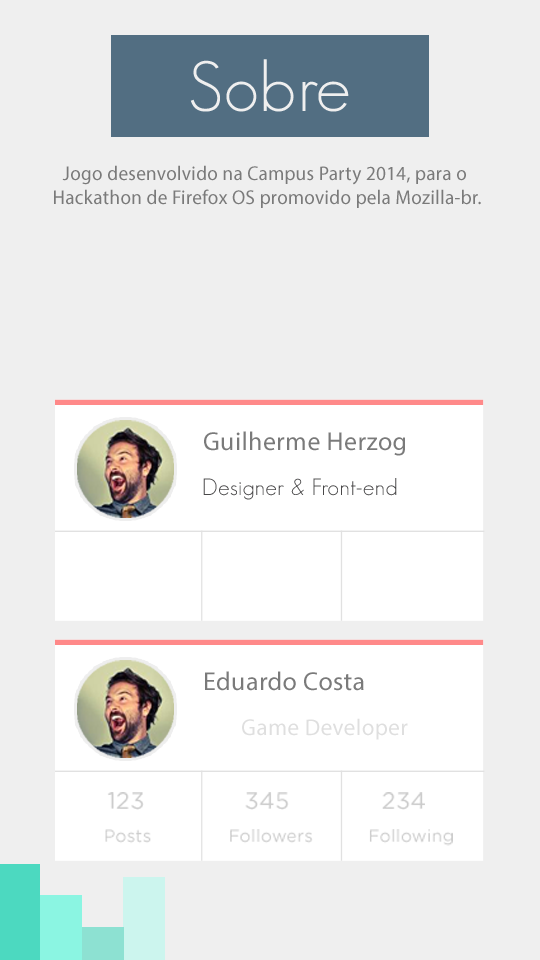
<style>
.page{position:relative;width:540px;height:960px;background:#efefef}
.page>*{position:absolute;margin:0}
.t1{font:70px "GeosansLight";letter-spacing:0.018em;color:#efefef}
.t2{font:20px "MyriadPro-Regular";letter-spacing:0.018em;color:#7a7a7a;scale:0.95 1}
.t3{font:25.9px "MyriadPro-Regular";letter-spacing:0.018em;color:#7a7a7a}
.t4{font:23px "GeosansLight";letter-spacing:0.018em;color:#494849}
.t5{font:23px "MyriadPro-Regular";letter-spacing:0.018em;color:#dfdfdf}
.t6{font:23px "GothamRounded-Book";letter-spacing:0.018em;color:#cccccc}
.t7{font:17.3px "GothamRounded-Book";letter-spacing:0.018em;color:#cccccc}
</style>
<div class="page">
<p class="t1" style="left:190px;top:59px;width:159px;height:53px">Sobre</p>
<p class="t2" style="left:54px;top:165px;width:427px;height:43px;text-align:center">Jogo desenvolvido na Campus Party 2014, para o <br>Hackathon de Firefox OS promovido pela Mozilla-br.</p>
<p class="t3" style="left:204px;top:431px;width:201px;height:25px">Guilherme Herzog</p>
<p class="t4" style="left:203px;top:478px;width:194px;height:22px">Designer &amp; Front-end</p>
<p class="t3" style="left:205px;top:671px;width:159px;height:20px">Eduardo Costa</p>
<p class="t5" style="left:242px;top:718px;width:166px;height:22px">Game Developer</p>
<p class="t6" style="left:107px;top:792px;width:318px;height:18px">123   345   234</p>
<p class="t7" style="left:105px;top:829px;width:348px;height:17px">Posts       Followers          Following</p>
</div>
